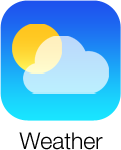
<style>
.page{position:relative;width:121px;height:150px}
.page>*{position:absolute;margin:0}
.t1{font:23px "HelveticaNeue-Light";color:#000000}
</style>
<div class="page">
<p class="t1" style="left:19px;top:132px;width:84px;height:18px">Weather</p>
</div>
